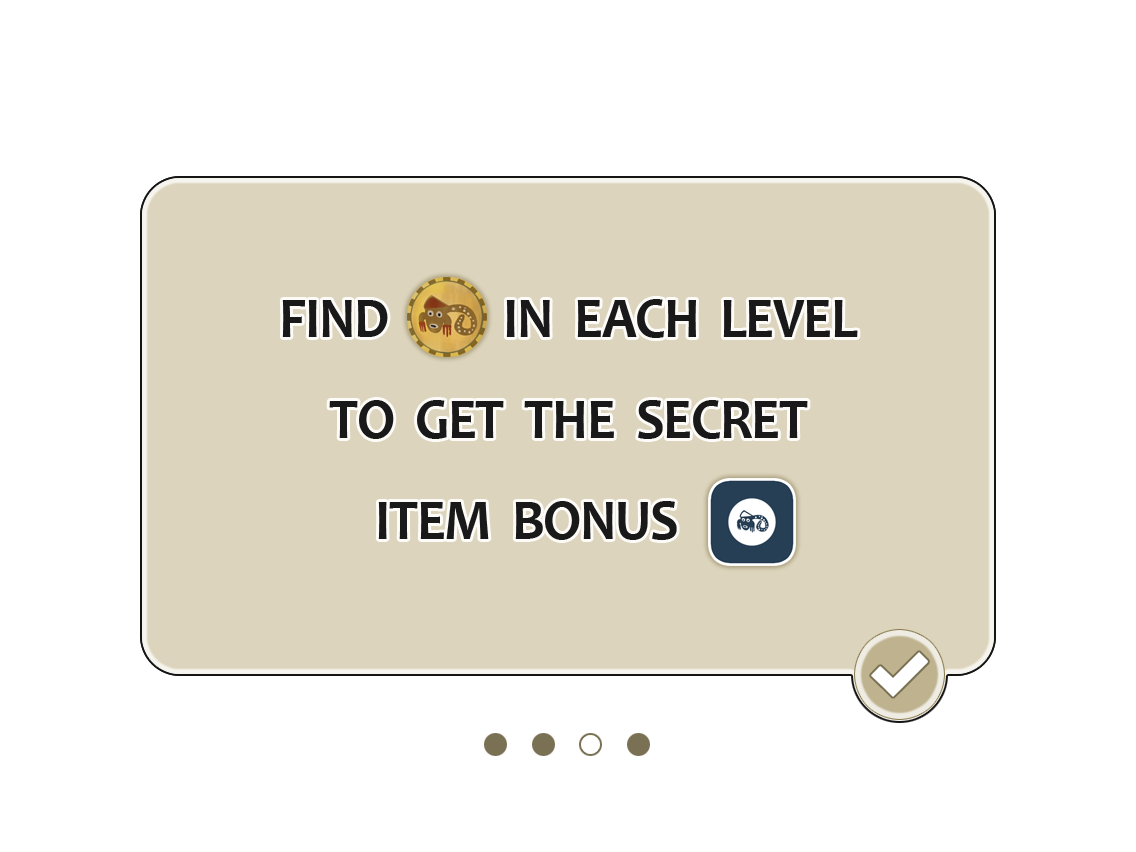
<style>
.page{position:relative;width:1136px;height:852px;background:#ffffff}
.page>*{position:absolute;margin:0}
.t1{font:57.8px/101px "Candara-Bold";letter-spacing:-0.02em;color:#191919;scale:0.94 1}
</style>
<div class="page">
<p class="t1" style="left:282px;top:299px;width:576px;height:241px;text-align:center">FIND  ----    IN  EACH  LEVEL<br>TO  GET  THE  SECRET<br>ITEM  BONUS   ----</p>
</div>
